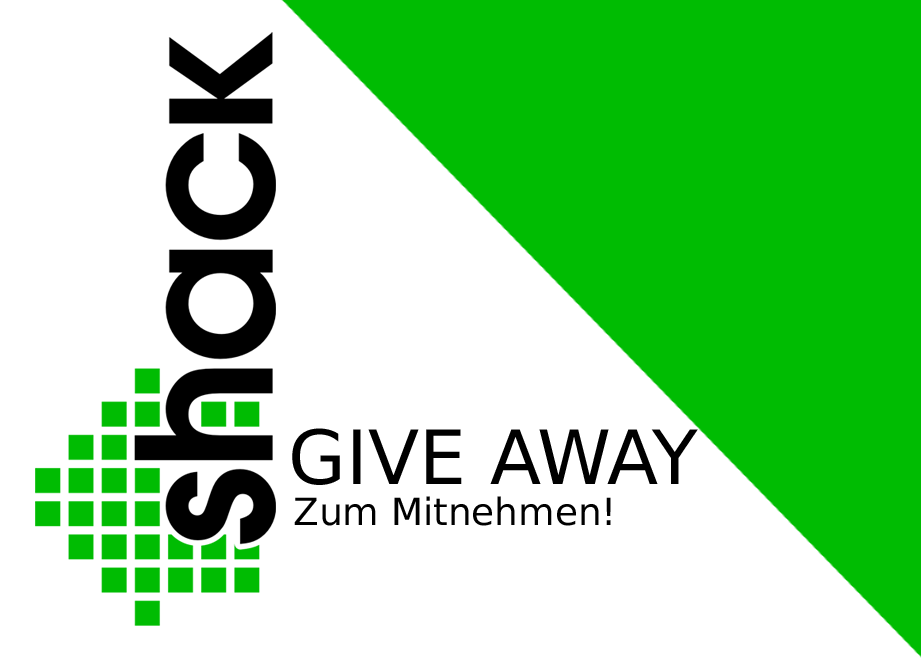
<style>
.page{position:relative;width:921px;height:661px;background:#ffffff}
.page>*{position:absolute;margin:0}
.t1{font:74.7px "PrimaSansBT-Roman";color:#000000}
.t2{font:37.4px "PrimaSansBT-Roman";color:#000000}
</style>
<div class="page">
<p class="t1" style="left:292px;top:428px;width:406px;height:57px">GIVE AWAY</p>
<p class="t2" style="left:294px;top:496px;width:317px;height:30px">Zum Mitnehmen!</p>
</div>
